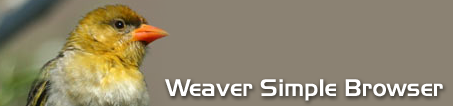
<style>
.page{position:relative;width:453px;height:106px;background:#8b8273}
.page>*{position:absolute;margin:0}
.t1{font:24px "Slicker";color:#ffffff}
</style>
<div class="page">
<p class="t1" style="left:165px;top:79px;width:278px;height:22px">Weaver Simple Browser</p>
</div>
